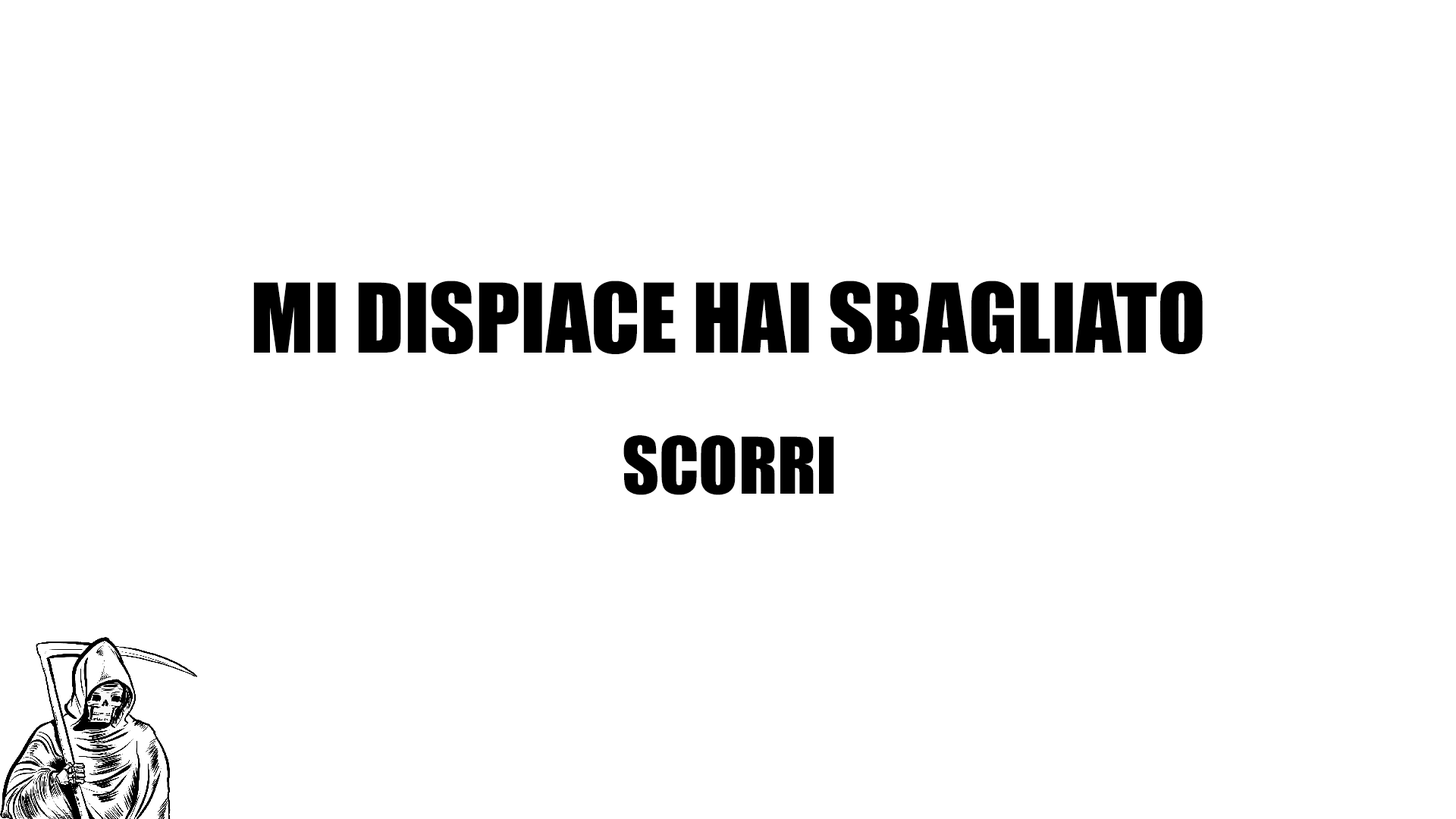
<style>
.page{position:relative;width:1456px;height:819px;background:#ffffff}
.page>*{position:absolute;margin:0}
.t1{font:88.8px "Impact";color:#000000;text-transform:uppercase}
.t2{font:72.2px "Impact";color:#000000;text-transform:uppercase}
</style>
<div class="page">
<p class="t1" style="left:253px;top:281px;width:950px;height:73px">MI dispiace hai sbagliato</p>
<p class="t2" style="left:623px;top:435px;width:211px;height:60px">SCORRi</p>
</div>
